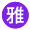
<style>
.page{position:relative;width:30px;height:30px;background:#7a24e4}
.page>*{position:absolute;margin:0}
.t1{font:18px "ShinGoPro-Medium";color:#ffffff}
</style>
<div class="page">
<p class="t1" style="left:6px;top:6px;width:18px;height:18px">雅</p>
</div>
